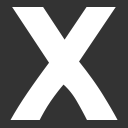
<style>
.page{position:relative;width:128px;height:128px;background:#333333}
.page>*{position:absolute;margin:0}
.t1{font:162.6px "Ubuntu-Bold";letter-spacing:0.05em;color:#ffffff}
</style>
<div class="page">
<p class="t1" style="left:10px;top:7px;width:108px;height:113px">X</p>
</div>
